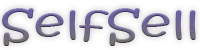
<style>
.page{position:relative;width:200px;height:50px;background:#ffffff}
.page>*{position:absolute;margin:0}
.t1{font:37.6px "KristenITC-Regular";scale:1.45 1}
</style>
<div class="page">
<p class="t1" style="left:2px;top:8px;width:194px;height:38px">SelfSell</p>
</div>
